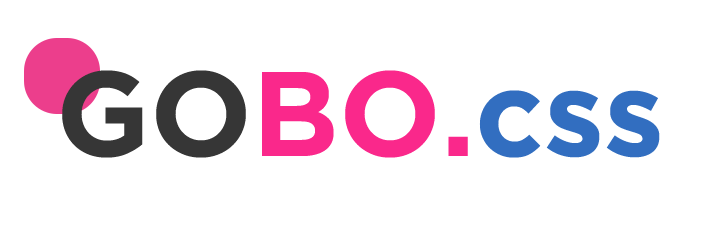
<style>
.page{position:relative;width:720px;height:228px;background:#ffffff}
.page>*{position:absolute;margin:0}
.t1{font:120px "GothamBold";color:#fa288b}
.t2{font:120px "GothamBold";color:#363636}
.t3{font:120px "GothamBold";color:#326ec0}
</style>
<div class="page">
<p class="t1" style="left:62px;top:70px;width:598px;height:88px"><span class="t2">GO</span>BO.<span class="t3">css</span></p>
</div>
